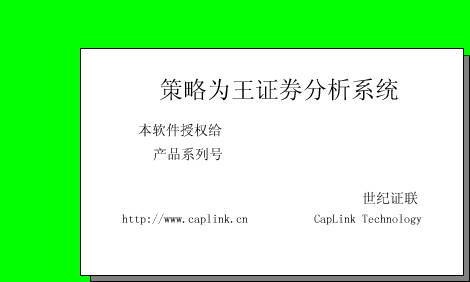
<style>
.page{position:relative;width:470px;height:282px;background:#ffffff}
.page>*{position:absolute;margin:0}
.t1{font:24px "SimSun";color:#000000}
.t2{font:14px "SimSun";color:#000000}
.t3{font:14px "SimSun"}
.t4{font:12px "SimSun"}
</style>
<div class="page">
<p class="t1" style="left:160px;top:78px;width:238px;height:23px">策略为王证券分析系统</p>
<p class="t2" style="left:138px;top:123px;width:84px;height:14px">本软件授权给</p>
<p class="t2" style="left:153px;top:147px;width:69px;height:14px">产品系列号</p>
<p class="t3" style="left:362px;top:191px;width:56px;height:14px"><span class="t4">                                        </span>世纪证联</p>
<p class="t4" style="left:122px;top:213px;width:300px;height:12px">http://www.caplink.cn           CapLink Technology</p>
</div>
